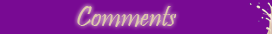
<style>
.page{position:relative;width:272px;height:34px;background:#780a93}
.page>*{position:absolute;margin:0}
.t1{font:30px "Pristina-Regular";color:#dec9ab}
</style>
<div class="page">
<p class="t1" style="left:77px;top:6px;width:100px;height:21px">Comments</p>
</div>
